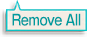
<style>
.page{position:relative;width:87px;height:37px;background:#ffffff}
.page>*{position:absolute;margin:0}
.t1{font:15px "GothicMB101Pro-DeBold";letter-spacing:-0.04em;color:#009c9f;scale:0.8 1}
</style>
<div class="page">
<p class="t1" style="left:12px;top:13px;width:69px;height:13px">Remove All</p>
</div>
